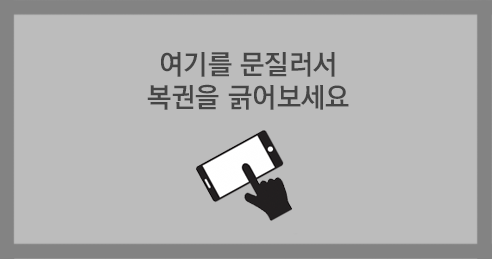
<style>
.page{position:relative;width:492px;height:259px;background:#bcbcbc}
.page>*{position:absolute;margin:0}
.t1{font:27.7px "KoreanGD15-R";color:#454545}
</style>
<div class="page">
<p class="t1" style="left:147px;top:52px;width:202px;height:58px;text-align:center">여기를 문질러서<br>복권을 긁어보세요</p>
</div>
